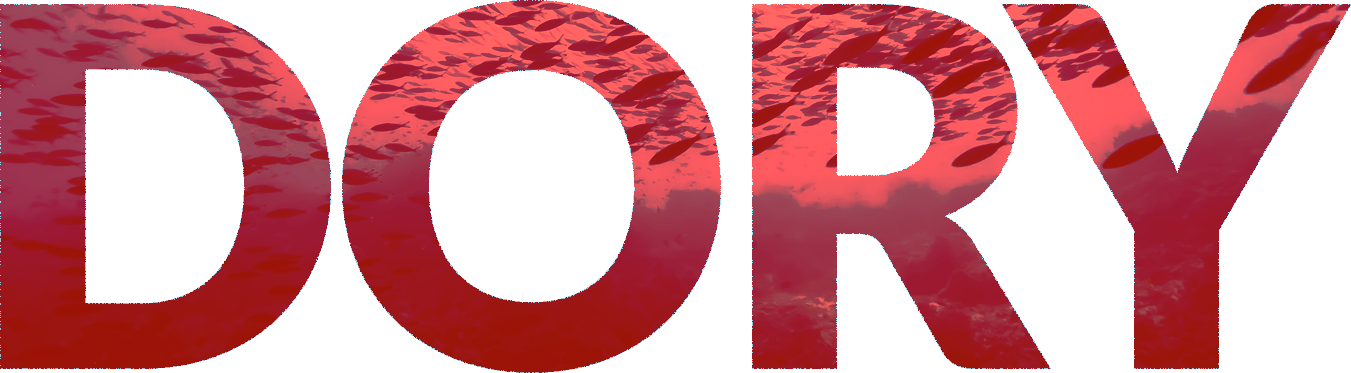
<style>
.page{position:relative;width:1351px;height:373px;background:#ffffff}
.page>*{position:absolute;margin:0}
.t1{font:500px "Lato-Black";letter-spacing:-0.035em}
</style>
<div class="page">
<p class="t1" style="left:0px;top:0px;width:1351px;height:373px">DORY</p>
</div>
